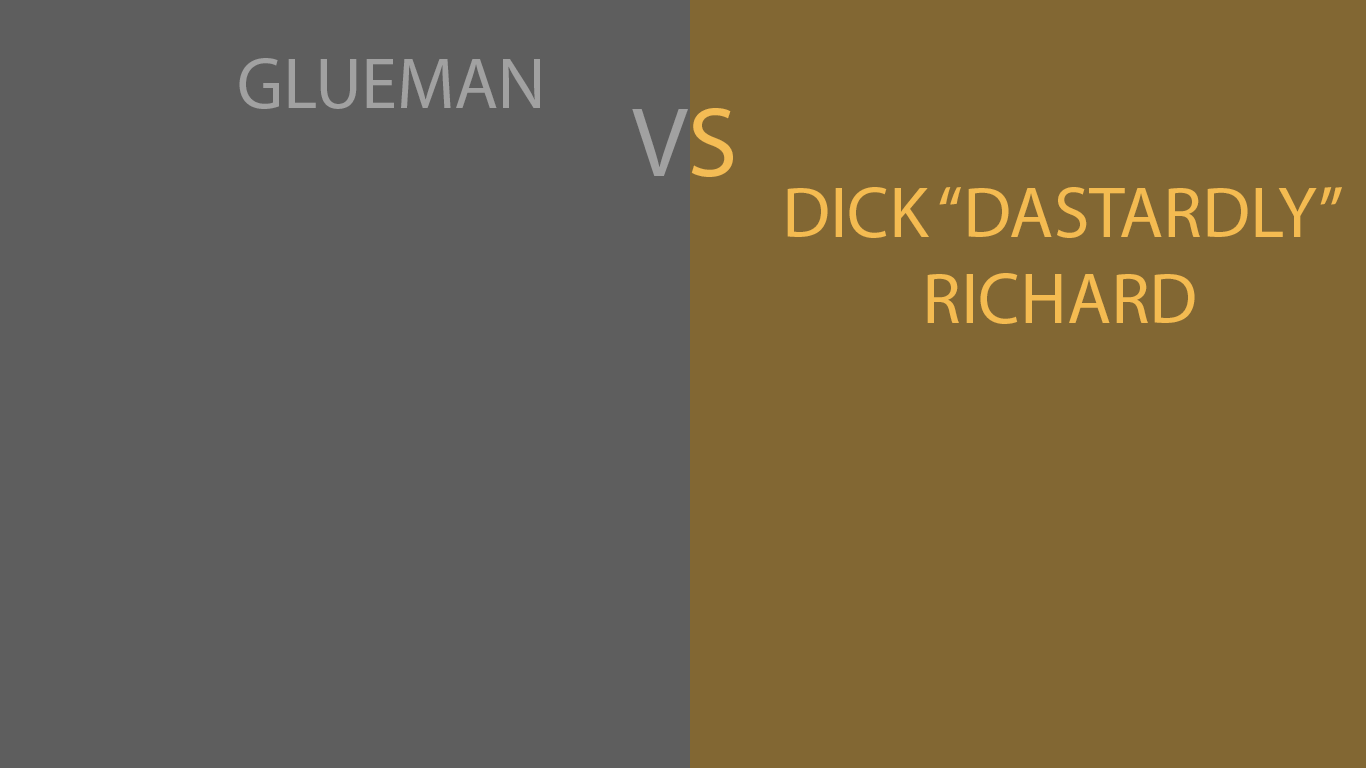
<style>
.page{position:relative;width:1366px;height:768px;background:#5e5e5e}
.page>*{position:absolute;margin:0}
.t1{font:72px "MyriadPro-Regular";color:#a1a1a1}
.t2{font:100px "MyriadPro-Regular";color:#a1a1a1}
.t3{font:100px "MyriadPro-Regular";color:#f4bc54}
.t4{font:72px "MyriadPro-Regular";color:#f4bb51}
</style>
<div class="page">
<p class="t1" style="left:239px;top:58px;width:301px;height:51px">GLUEMAN</p>
<p class="t2" style="left:632px;top:108px;width:101px;height:69px">V<span class="t3">S</span></p>
<p class="t4" style="left:787px;top:187px;width:555px;height:137px;text-align:center">DICK “DASTARDLY”<br>RICHARD</p>
</div>
